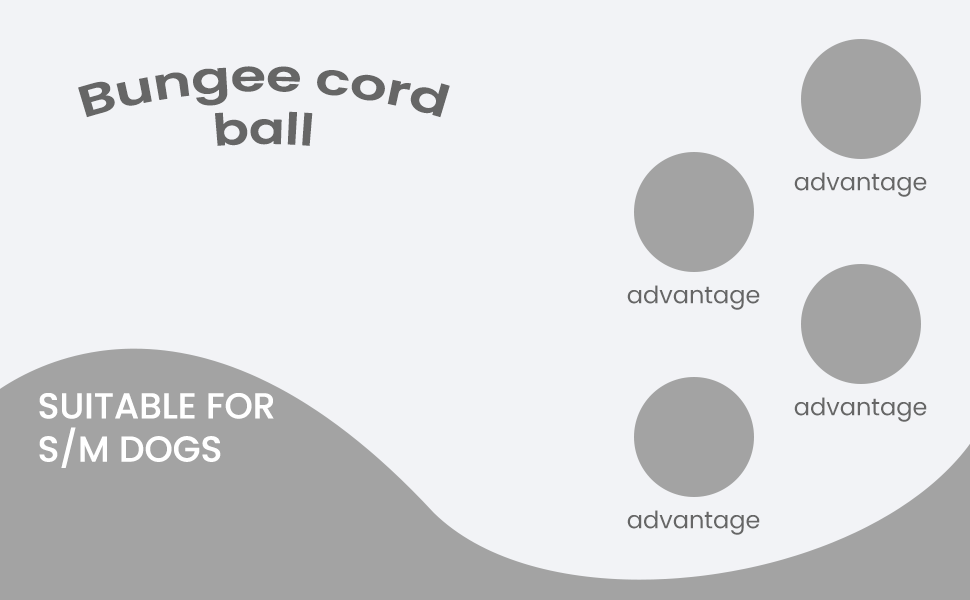
<style>
.page{position:relative;width:970px;height:600px;background:#f2f3f6}
.page>*{position:absolute;margin:0}
.t1{font:44px "Poppins-SemiBold";color:#666666}
.t2{font:24px "Poppins-Regular";color:#666666}
.t3{font:36px "Poppins-Medium";color:#ffffff}
</style>
<div class="page">
<p class="t1" style="left:78px;top:66px;width:372px;height:80px;text-align:center">Bungee cord<br>ball</p>
<p class="t2" style="left:794px;top:172px;width:133px;height:25px">advantage</p>
<p class="t2" style="left:627px;top:285px;width:133px;height:25px">advantage</p>
<p class="t3" style="left:39px;top:393px;width:235px;height:75px">SUITABLE FOR<br>S/M DOGS</p>
<p class="t2" style="left:794px;top:397px;width:133px;height:25px">advantage</p>
<p class="t2" style="left:627px;top:510px;width:133px;height:25px">advantage</p>
</div>
